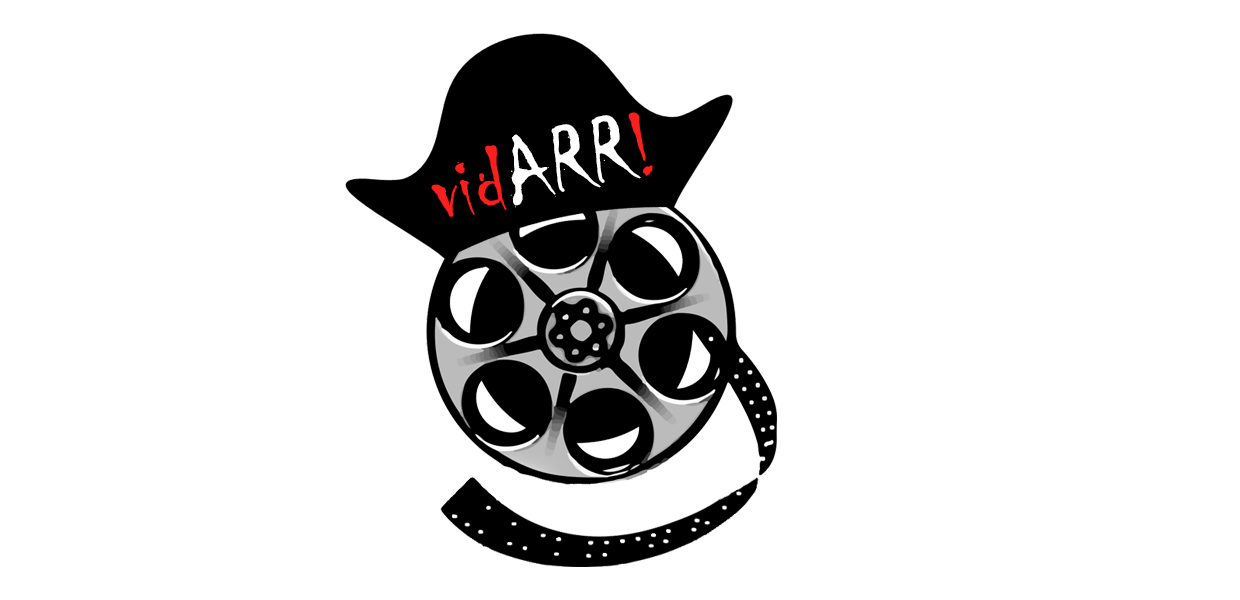
<style>
.page{position:relative;width:1240px;height:600px;background:#ffffff}
.page>*{position:absolute;margin:0}
.t1{font:94.7px "Chiller-Regular";color:#f91f1f}
.t2{font:94.7px "Chiller-Regular";color:#ffffff}
</style>
<div class="page">
<p class="t1" style="left:431px;top:112px;width:222px;height:105px;rotate:-13deg">vid<span class="t2">ARR</span>!</p>
</div>
